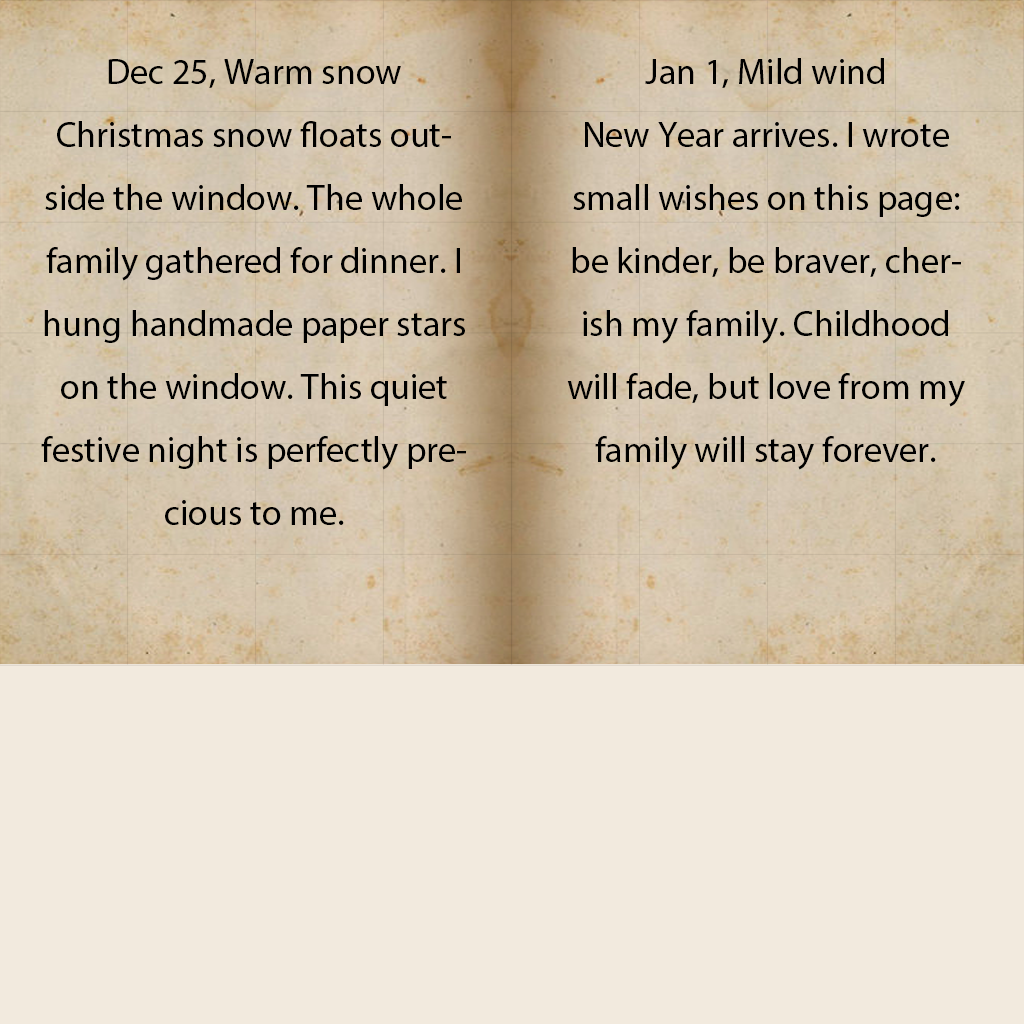
<style>
.page{position:relative;width:1024px;height:1024px;background:#f2eade}
.page>*{position:absolute;margin:0}
.t1{font:36px "MyriadPro-Regular";color:#000000}
</style>
<div class="page">
<p class="t1" style="left:41px;top:59px;width:425px;height:466px;text-align:center">Dec 25, Warm snow<br>Christmas snow floats outside the window. The whole family gathered for dinner. I hung handmade paper stars on the window. This quiet festive night is perfectly precious to me.</p>
<p class="t1" style="left:567px;top:58px;width:398px;height:412px;text-align:center">Jan 1, Mild wind<br>New Year arrives. I wrote small wishes on this page: be kinder, be braver, cherish my family. Childhood will fade, but love from my family will stay forever.</p>
</div>
